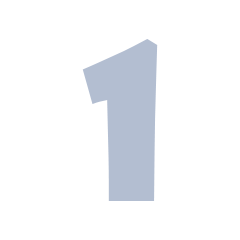
<style>
.page{position:relative;width:240px;height:240px;background:#ffffff}
.page>*{position:absolute;margin:0}
.t1{font:208.3px "ShowcardGothic-Reg";color:#b3bed1}
</style>
<div class="page">
<p class="t1" style="left:82px;top:39px;width:76px;height:162px">1</p>
</div>
